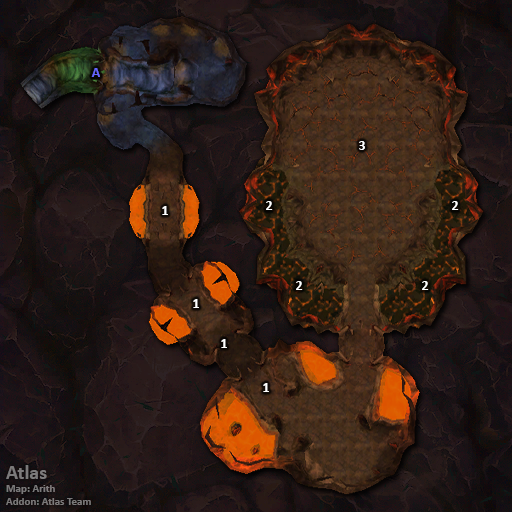
<style>
.page{position:relative;width:512px;height:512px}
.page>*{position:absolute;margin:0}
.t1{font:14px "Calibri-Bold";color:#6666ff}
.t2{font:14px "Calibri-Bold";color:#ffffff}
.t3{font:11px "Calibri-Bold";color:#7b7a7a}
.t4{font:20px "Calibri-Bold";color:#7b7a7a}
</style>
<div class="page">
<p class="t1" style="left:91px;top:68px;width:9px;height:9px">A</p>
<p class="t2" style="left:359px;top:141px;width:6px;height:9px">3</p>
<p class="t2" style="left:162px;top:206px;width:6px;height:9px">1</p>
<p class="t2" style="left:266px;top:201px;width:7px;height:9px">2</p>
<p class="t2" style="left:452px;top:201px;width:7px;height:9px">2</p>
<p class="t2" style="left:296px;top:281px;width:7px;height:9px">2</p>
<p class="t2" style="left:422px;top:281px;width:7px;height:9px">2</p>
<p class="t2" style="left:193px;top:299px;width:6px;height:9px">1</p>
<p class="t2" style="left:221px;top:339px;width:6px;height:9px">1</p>
<p class="t2" style="left:263px;top:383px;width:6px;height:9px">1</p>
<p class="t3" style="left:6px;top:465px;width:85px;height:40px"><span class="t4">Atlas<br></span>Map: Arith<br>Addon: Atlas Team</p>
</div>
